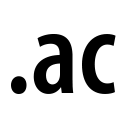
<style>
.page{position:relative;width:128px;height:128px;background:#ffffff}
.page>*{position:absolute;margin:0}
.t1{font:120px "MyriadPro-SemiboldCond";color:#000000}
</style>
<div class="page">
<p class="t1" style="left:11px;top:34px;width:105px;height:60px">.ac</p>
</div>
